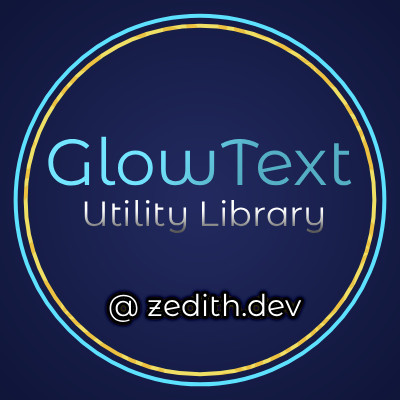
<style>
.page{position:relative;width:400px;height:400px}
.page>*{position:absolute;margin:0}
.t1{font:65px "MontserratAlternates-Regular"}
.t2{font:35px "MontserratAlternates-Regular"}
.t3{font:30px "MontserratAlternates-Regular";color:#ffffff}
</style>
<div class="page">
<p class="t1" style="left:48px;top:136px;width:304px;height:50px">GlowText</p>
<p class="t2" style="left:84px;top:200px;width:240px;height:33px">Utility Library</p>
<p class="t3" style="left:109px;top:293px;width:193px;height:29px">@ zedith.dev</p>
</div>
